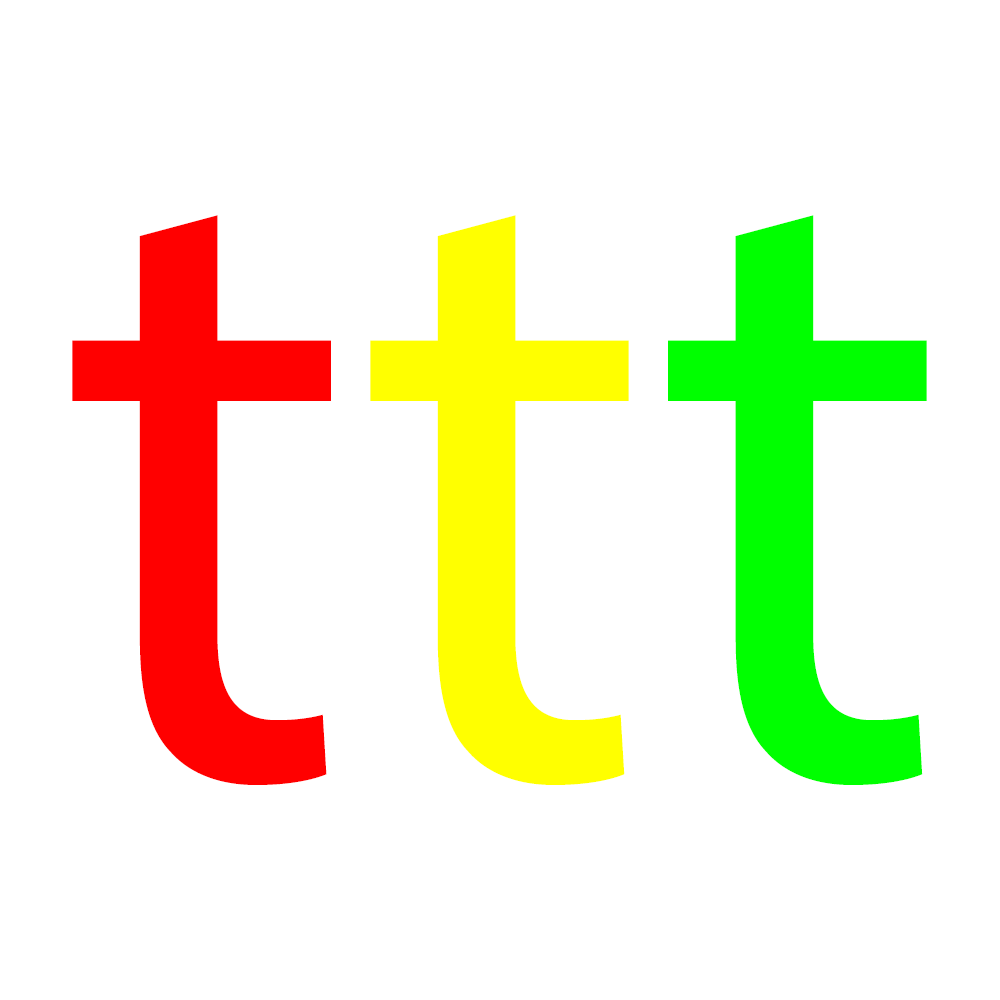
<style>
.page{position:relative;width:1000px;height:1000px;background:#ffffff}
.page>*{position:absolute;margin:0}
.t1{font:900px "MyriadPro-Regular";color:#ff0000}
.t2{font:900px "MyriadPro-Regular";color:#ffff00}
.t3{font:900px "MyriadPro-Regular";color:#00ff00}
</style>
<div class="page">
<p class="t1" style="left:72px;top:215px;width:855px;height:570px">t<span class="t2">t</span><span class="t3">t</span></p>
</div>
